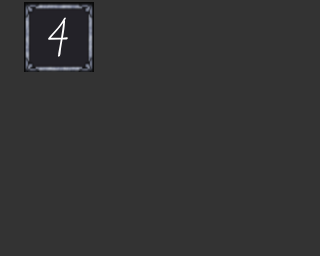
<style>
.page{position:relative;width:320px;height:256px;background:#333333}
.page>*{position:absolute;margin:0}
.t1{font:43px "BadScript-Regular";color:#ffffff}
</style>
<div class="page">
<p class="t1" style="left:48px;top:17px;width:20px;height:40px">4</p>
</div>
